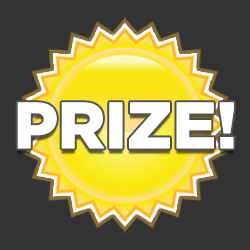
<style>
.page{position:relative;width:250px;height:250px;background:#333333}
.page>*{position:absolute;margin:0}
.t1{font:65.4px "Gotham-Black";color:#ffffff}
</style>
<div class="page">
<p class="t1" style="left:17px;top:102px;width:217px;height:47px">PRIZE!</p>
</div>
